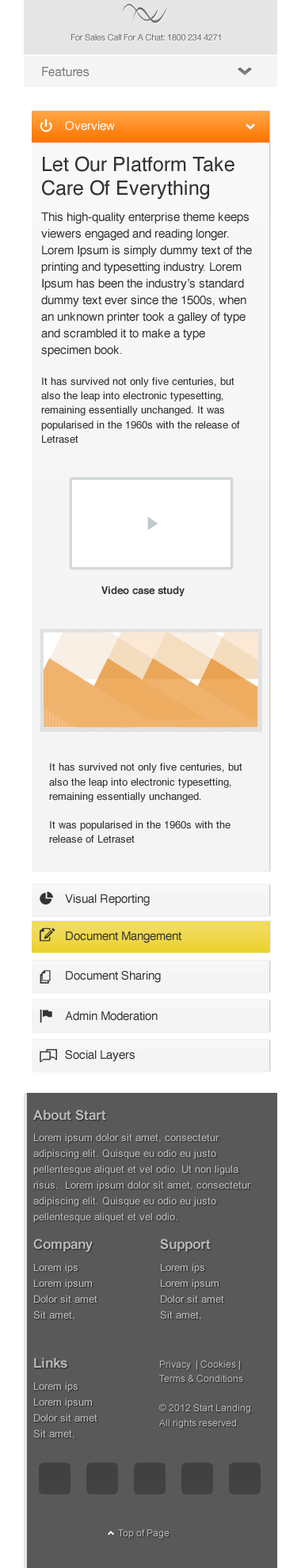
<style>
.page{position:relative;width:301px;height:1568px;background:#ffffff}
.page>*{position:absolute;margin:0}
.t1{font:8.7px "HelveticaNeue-Roman";letter-spacing:-0.02em;color:#6f6f6f}
.t2{font:12.7px "HelveticaNeue-Roman";letter-spacing:-0.02em;color:#737373}
.t3{font:11.9px "Helvetica";color:#ffffff}
.t4{font:19.8px/23.8px "Helvetica";color:#333333}
.t5{font:11.9px/16.6px "Helvetica";color:#333333}
.t6{font:10.3px/14.4px "Helvetica";color:#333333}
.t7{font:10.3px "Helvetica-Bold";color:#333333}
.t8{font:11.9px "Helvetica";color:#333333}
.t9{font:13.5px "Arial-BoldMT";color:#bbbbbb}
.t10{font:10.3px/15.9px "ArialMT";color:#bbbbbb}
.t11{font:13.5px "Arial-BoldMT";color:#bababa}
.t12{font:10.3px "ArialMT";color:#bbbbbb}
.t13{font:9.5px/14.6px "ArialMT";color:#bababa}
.t14{font:9.5px "ArialMT";color:#bbbbbb}
</style>
<div class="page">
<p class="t1" style="left:71px;top:34px;width:150px;height:7px">For Sales Call For A Chat: 1800 234 4271</p>
<p class="t2" style="left:42px;top:67px;width:47px;height:10px">Features</p>
<p class="t3" style="left:65px;top:121px;width:50px;height:10px">Overview</p>
<p class="t4" style="left:42px;top:156px;width:192px;height:44px">Let Our Platform Take Care Of Everything</p>
<p class="t5" style="left:41px;top:212px;width:211px;height:231px">This high-quality enterprise theme keeps viewers engaged and reading longer.  Lorem Ipsum is simply dummy text of the printing and typesetting industry. Lorem Ipsum has been the industry’s standard dummy text ever since the 1500s, when an unknown printer took a galley of type and scrambled it to make a type specimen book. <br><br><span class="t6">It has survived not only five centuries, but also the leap into electronic typesetting, remaining essentially unchanged. It was popularised in the 1960s with the release of Letraset</span></p>
<p class="t7" style="left:101px;top:586px;width:84px;height:10px">Video case study</p>
<p class="t6" style="left:49px;top:763px;width:193px;height:80px">It has survived not only five centuries, but also the leap into electronic typesetting, remaining essentially unchanged. <br><br>It was popularised in the 1960s with the release of Letraset</p>
<p class="t8" style="left:65px;top:894px;width:85px;height:12px">Visual Reporting</p>
<p class="t8" style="left:66px;top:931px;width:115px;height:12px">Document Mangement</p>
<p class="t8" style="left:66px;top:971px;width:95px;height:12px">Document Sharing</p>
<p class="t8" style="left:65px;top:1011px;width:93px;height:10px">Admin Moderation</p>
<p class="t8" style="left:65px;top:1050px;width:70px;height:12px">Social Layers</p>
<p class="t9" style="left:33px;top:1109px;width:73px;height:12px">About Start</p>
<p class="t10" style="left:33px;top:1133px;width:218px;height:90px">Lorem ipsum dolor sit amet, consectetur adipiscing elit. Quisque eu odio eu justo pellentesque aliquet et vel odio. Ut non ligula risus.  Lorem ipsum dolor sit amet, consectetur adipiscing elit. Quisque eu odio eu justo pellentesque aliquet et vel odio.</p>
<p class="t11" style="left:33px;top:1239px;width:60px;height:13px">Company</p>
<p class="t11" style="left:160px;top:1239px;width:51px;height:13px">Support</p>
<p class="t12" style="left:34px;top:1263px;width:44px;height:10px">Lorem ips</p>
<p class="t12" style="left:161px;top:1263px;width:43px;height:10px">Lorem ips</p>
<p class="t12" style="left:34px;top:1279px;width:58px;height:10px">Lorem ipsum</p>
<p class="t12" style="left:161px;top:1279px;width:58px;height:10px">Lorem ipsum</p>
<p class="t12" style="left:34px;top:1295px;width:63px;height:8px">Dolor sit amet</p>
<p class="t12" style="left:161px;top:1295px;width:63px;height:8px">Dolor sit amet</p>
<p class="t12" style="left:33px;top:1311px;width:41px;height:9px">Sit amet,</p>
<p class="t12" style="left:160px;top:1311px;width:41px;height:9px">Sit amet,</p>
<p class="t11" style="left:34px;top:1357px;width:33px;height:11px">Links</p>
<p class="t13" style="left:159px;top:1361px;width:94px;height:68px">Privacy  | Cookies | Terms &amp; Conditions <br><br>© 2012 Start Landing. All rights reserved.</p>
<p class="t12" style="left:34px;top:1382px;width:44px;height:10px">Lorem ips</p>
<p class="t12" style="left:34px;top:1398px;width:58px;height:10px">Lorem ipsum</p>
<p class="t12" style="left:34px;top:1414px;width:63px;height:7px">Dolor sit amet</p>
<p class="t12" style="left:33px;top:1429px;width:41px;height:10px">Sit amet,</p>
<p class="t14" style="left:118px;top:1529px;width:51px;height:10px">Top of Page</p>
</div>
